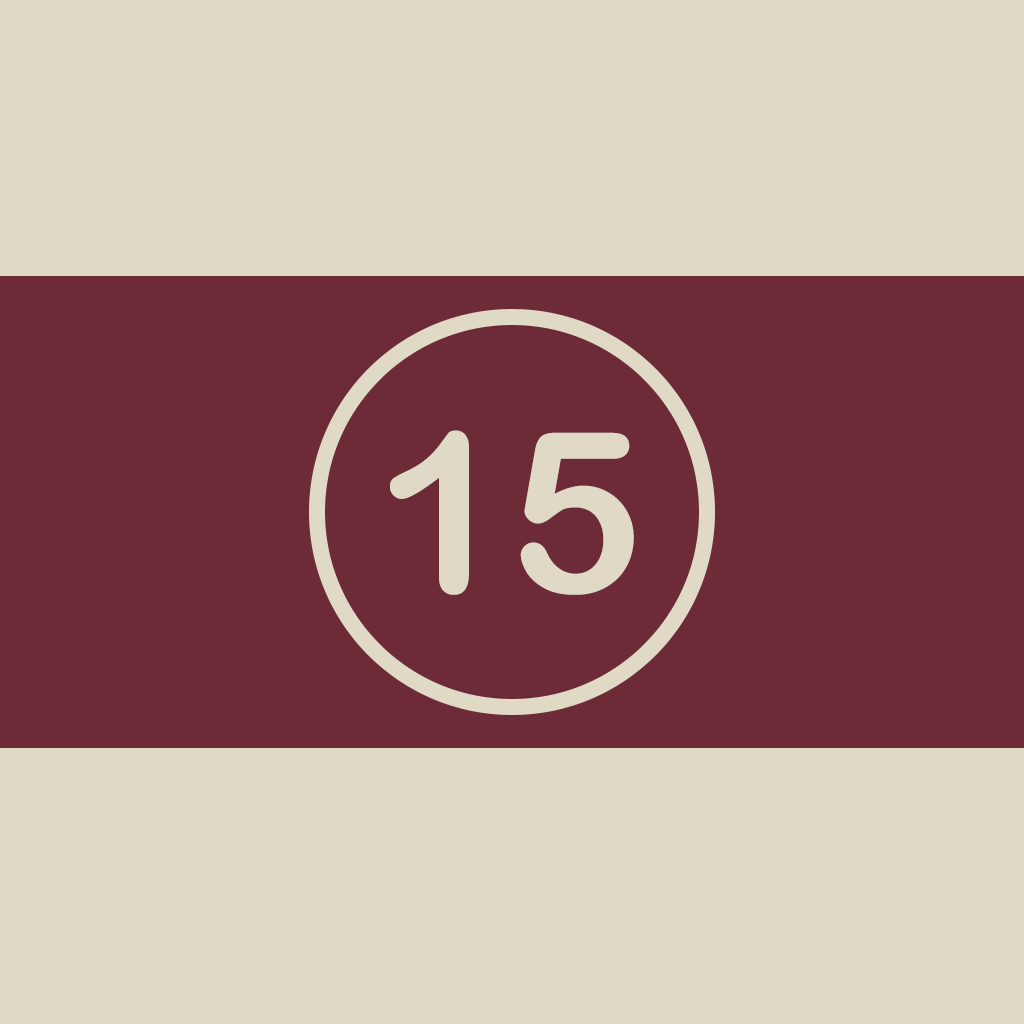
<style>
.page{position:relative;width:1024px;height:1024px;background:#dfd9c5}
.page>*{position:absolute;margin:0}
.t1{font:224px "ArialRoundedMTBold";color:#dfd9c5}
</style>
<div class="page">
<p class="t1" style="left:390px;top:430px;width:244px;height:165px">15</p>
</div>
